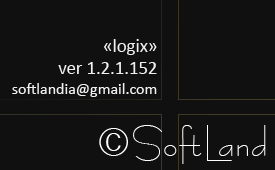
<style>
.page{position:relative;width:275px;height:170px;background:#101010}
.page>*{position:absolute;margin:0}
.t1{font:18.7px "Calibri";color:#f0f0f0}
.t2{font:16px "Calibri";color:#f0f0f0}
.t3{font:40px "BernhardFashionBT-Regular";color:#ffffff}
</style>
<div class="page">
<p class="t1" style="left:12px;top:39px;width:145px;height:58px;text-align:right">«logix»<br>ver 1.2.1.152<br><span class="t2">softlandia@gmail.com</span></p>
<p class="t3" style="left:99px;top:125px;width:167px;height:39px">©SoftLand</p>
</div>
